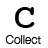
<style>
.page{position:relative;width:48px;height:48px;background:#ffffff}
.page>*{position:absolute;margin:0}
.t1{font:36px "CourierNewPS-BoldMT";color:#000000}
.t2{font:12px "HelveticaNeue-Light";color:#000000}
</style>
<div class="page">
<p class="t1" style="left:15px;top:7px;width:20px;height:21px">C</p>
<p class="t2" style="left:5px;top:35px;width:36px;height:9px">Collect</p>
</div>
